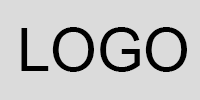
<style>
.page{position:relative;width:200px;height:100px;background:#dbdbdb}
.page>*{position:absolute;margin:0}
.t1{font:60px "ArialMT";color:#000000}
</style>
<div class="page">
<p class="t1" style="left:21px;top:27px;width:166px;height:45px">LOGO</p>
</div>
